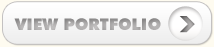
<style>
.page{position:relative;width:214px;height:47px}
.page>*{position:absolute;margin:0}
.t1{font:16px "FuturaBT-ExtraBlack";color:#a9a8a8}
</style>
<div class="page">
<p class="t1" style="left:14px;top:18px;width:147px;height:12px">VIEW PORTFOLIO</p>
</div>
